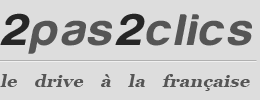
<style>
.page{position:relative;width:260px;height:100px;background:#dddddd}
.page>*{position:absolute;margin:0}
.t1{font:45.8px "Harabara-Bold";color:#555555;font-style:italic;scale:1.1 1}
.t2{font:45.8px "Harabara-Bold";color:#262626;font-style:italic;scale:1.1 1}
.t3{font:16.7px "Georgia-Bold";color:#555555;font-style:italic;scale:1.1 1}
</style>
<div class="page">
<p class="t1" style="left:0px;top:13px;width:252px;height:41px"><span class="t2">2</span>pas<span class="t2">2</span>clics</p>
<p class="t3" style="left:0px;top:74px;width:250px;height:17px">le drive à la française</p>
</div>
